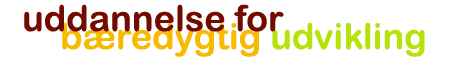
<style>
.page{position:relative;width:454px;height:64px;background:#ffffff}
.page>*{position:absolute;margin:0}
.t1{font:36px "ArialRoundedMTBold";color:#730b00}
.t2{font:36px "ArialRoundedMTBold";color:#f7ba00}
.t3{font:36px "ArialRoundedMTBold";color:#b5e209}
</style>
<div class="page">
<p class="t1" style="left:24px;top:4px;width:260px;height:28px">uddannelse for</p>
<p class="t2" style="left:62px;top:22px;width:363px;height:35px">bæredygtig <span class="t3">udvikling</span></p>
</div>
